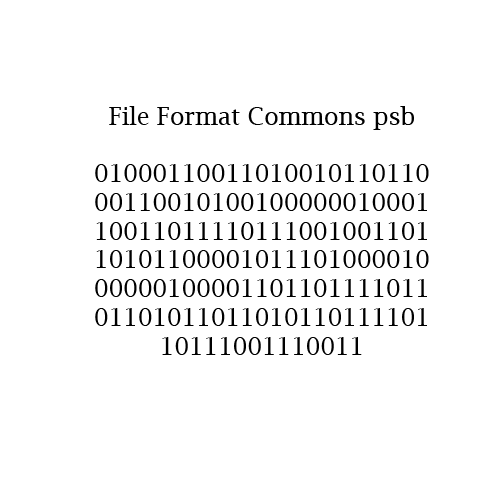
<style>
.page{position:relative;width:500px;height:500px;background:#ffffff}
.page>*{position:absolute;margin:0}
.t1{font:24px "LucidaBright";color:#000000}
</style>
<div class="page">
<p class="t1" style="left:95px;top:106px;width:334px;height:249px;text-align:center">File Format Commons psb<br><br>01000110011010010110110001100101001000000100011001101111011100100110110101100001011101000010000001000011011011110110110101101101011011110110111001110011</p>
</div>
